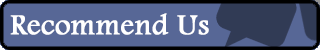
<style>
.page{position:relative;width:320px;height:50px;background:#576796}
.page>*{position:absolute;margin:0}
.t1{font:30px "FootlightMTLight";color:#ffffff;font-weight:bold}
</style>
<div class="page">
<p class="t1" style="left:10px;top:13px;width:199px;height:22px">Recommend Us</p>
</div>
